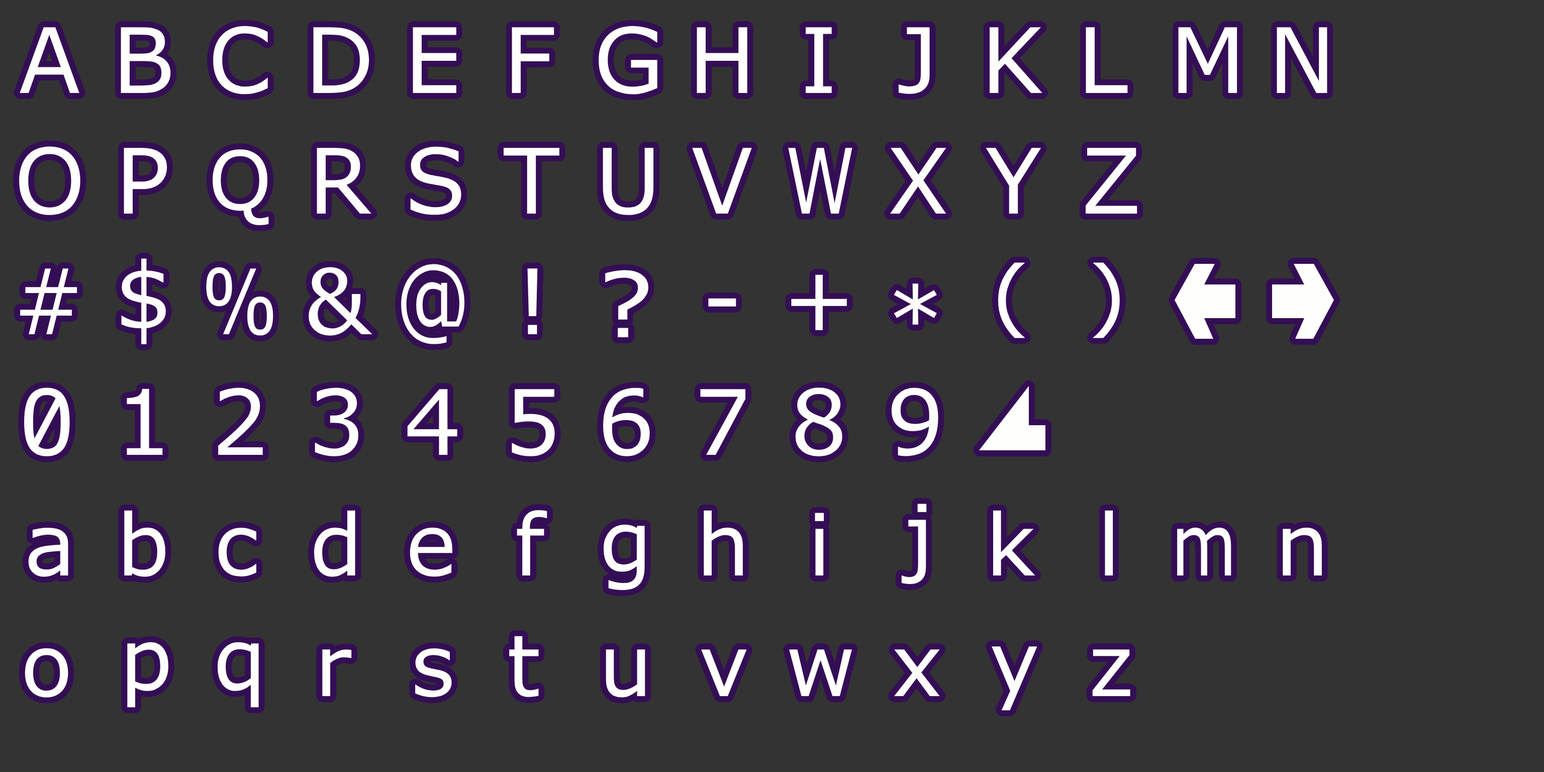
<style>
.page{position:relative;width:1544px;height:772px;background:#333333}
.page>*{position:absolute;margin:0}
.t1{font:90.5px "Verdana";letter-spacing:-0.065em;color:#fefefd}
.t2{font:81.1px "Verdana";letter-spacing:-0.065em;color:#fefefd}
.t3{font:90.5px "Verdana";letter-spacing:-0.065em;color:#fefefd;scale:0.79 1}
.t4{font:93.8px "Verdana";letter-spacing:-0.065em;color:#fefefd;scale:0.82 1}
.t5{font:90.5px "Verdana";letter-spacing:-0.065em;color:#fefefd;scale:1.15 1}
.t6{font:78.4px "Verdana";letter-spacing:-0.065em;color:#fefefd;scale:1.15 1}
.t7{font:85.5px "Verdana";letter-spacing:-0.065em;color:#fefefd}
.t8{font:85.5px "Verdana";letter-spacing:-0.065em;color:#fefefd;scale:0.79 1}
</style>
<div class="page">
<p class="t1" style="left:20px;top:27px;width:59px;height:66px">A</p>
<p class="t1" style="left:121px;top:27px;width:50px;height:66px">B</p>
<p class="t1" style="left:213px;top:26px;width:55px;height:69px">C</p>
<p class="t1" style="left:313px;top:27px;width:56px;height:66px">D</p>
<p class="t1" style="left:413px;top:27px;width:43px;height:66px">E</p>
<p class="t1" style="left:512px;top:27px;width:42px;height:66px">F</p>
<p class="t1" style="left:599px;top:26px;width:59px;height:69px">G</p>
<p class="t1" style="left:697px;top:27px;width:51px;height:66px">H</p>
<p class="t1" style="left:806px;top:27px;width:26px;height:66px">I</p>
<p class="t1" style="left:898px;top:27px;width:32px;height:67px">J</p>
<p class="t1" style="left:990px;top:27px;width:53px;height:66px">K</p>
<p class="t1" style="left:1086px;top:27px;width:42px;height:66px">L</p>
<p class="t1" style="left:1178px;top:27px;width:60px;height:66px">M</p>
<p class="t1" style="left:1277px;top:27px;width:51px;height:66px">N</p>
<p class="t1" style="left:19px;top:146px;width:61px;height:69px">O</p>
<p class="t1" style="left:124px;top:148px;width:43px;height:66px">P</p>
<p class="t2" style="left:213px;top:149px;width:56px;height:76px">Q</p>
<p class="t1" style="left:317px;top:148px;width:54px;height:66px">R</p>
<p class="t1" style="left:410px;top:146px;width:51px;height:69px">S</p>
<p class="t1" style="left:504px;top:148px;width:56px;height:66px">T</p>
<p class="t1" style="left:603px;top:148px;width:51px;height:67px">U</p>
<p class="t1" style="left:692px;top:148px;width:60px;height:66px">V</p>
<p class="t3" style="left:788px;top:148px;width:65px;height:66px">W</p>
<p class="t1" style="left:890px;top:148px;width:57px;height:66px">X</p>
<p class="t1" style="left:986px;top:148px;width:56px;height:66px">Y</p>
<p class="t1" style="left:1086px;top:148px;width:52px;height:66px">Z</p>
<p class="t1" style="left:20px;top:268px;width:57px;height:66px">#</p>
<p class="t1" style="left:121px;top:258px;width:45px;height:86px">$</p>
<p class="t3" style="left:206px;top:267px;width:67px;height:69px">%</p>
<p class="t1" style="left:309px;top:267px;width:64px;height:69px">&amp;</p>
<p class="t4" style="left:401px;top:264px;width:64px;height:80px">@</p>
<p class="t1" style="left:527px;top:268px;width:11px;height:66px">!</p>
<p class="t5" style="left:605px;top:270px;width:43px;height:67px">?</p>
<p class="t6" style="left:998px;top:262px;width:27px;height:76px">(</p>
<p class="t6" style="left:1093px;top:262px;width:27px;height:76px">)</p>
<p class="t1" style="left:791px;top:274px;width:56px;height:56px">+</p>
<p class="t1" style="left:894px;top:284px;width:43px;height:41px">*</p>
<p class="t1" style="left:708px;top:298px;width:28px;height:9px">-</p>
<p class="t1" style="left:24px;top:388px;width:46px;height:68px">0</p>
<p class="t1" style="left:127px;top:389px;width:36px;height:66px">1</p>
<p class="t1" style="left:218px;top:388px;width:45px;height:67px">2</p>
<p class="t1" style="left:315px;top:388px;width:43px;height:68px">3</p>
<p class="t1" style="left:407px;top:389px;width:50px;height:66px">4</p>
<p class="t1" style="left:512px;top:389px;width:43px;height:67px">5</p>
<p class="t1" style="left:603px;top:388px;width:47px;height:68px">6</p>
<p class="t1" style="left:700px;top:389px;width:46px;height:66px">7</p>
<p class="t1" style="left:795px;top:388px;width:48px;height:68px">8</p>
<p class="t1" style="left:891px;top:388px;width:48px;height:68px">9</p>
<p class="t7" style="left:901px;top:504px;width:26px;height:81px">j</p>
<p class="t7" style="left:124px;top:510px;width:41px;height:67px">b</p>
<p class="t7" style="left:314px;top:510px;width:41px;height:67px">d</p>
<p class="t7" style="left:517px;top:510px;width:30px;height:66px">f</p>
<p class="t7" style="left:704px;top:510px;width:39px;height:66px">h</p>
<p class="t7" style="left:815px;top:513px;width:9px;height:63px">i</p>
<p class="t7" style="left:993px;top:510px;width:43px;height:66px">k</p>
<p class="t7" style="left:1105px;top:510px;width:8px;height:66px">l</p>
<p class="t7" style="left:28px;top:528px;width:40px;height:49px">a</p>
<p class="t7" style="left:218px;top:528px;width:38px;height:49px">c</p>
<p class="t7" style="left:410px;top:527px;width:42px;height:50px">e</p>
<p class="t7" style="left:603px;top:524px;width:42px;height:67px">g</p>
<p class="t8" style="left:1177px;top:527px;width:55px;height:49px">m</p>
<p class="t7" style="left:1283px;top:527px;width:39px;height:49px">n</p>
<p class="t7" style="left:127px;top:642px;width:41px;height:66px">p</p>
<p class="t7" style="left:217px;top:642px;width:42px;height:66px">q</p>
<p class="t7" style="left:509px;top:636px;width:30px;height:61px">t</p>
<p class="t7" style="left:25px;top:648px;width:43px;height:50px">o</p>
<p class="t7" style="left:322px;top:649px;width:30px;height:47px">r</p>
<p class="t7" style="left:415px;top:648px;width:37px;height:50px">s</p>
<p class="t7" style="left:606px;top:649px;width:39px;height:49px">u</p>
<p class="t7" style="left:701px;top:649px;width:46px;height:48px">v</p>
<p class="t7" style="left:789px;top:649px;width:63px;height:48px">w</p>
<p class="t7" style="left:894px;top:649px;width:46px;height:48px">x</p>
<p class="t7" style="left:992px;top:646px;width:46px;height:65px">y</p>
<p class="t7" style="left:1092px;top:649px;width:39px;height:48px">z</p>
</div>
